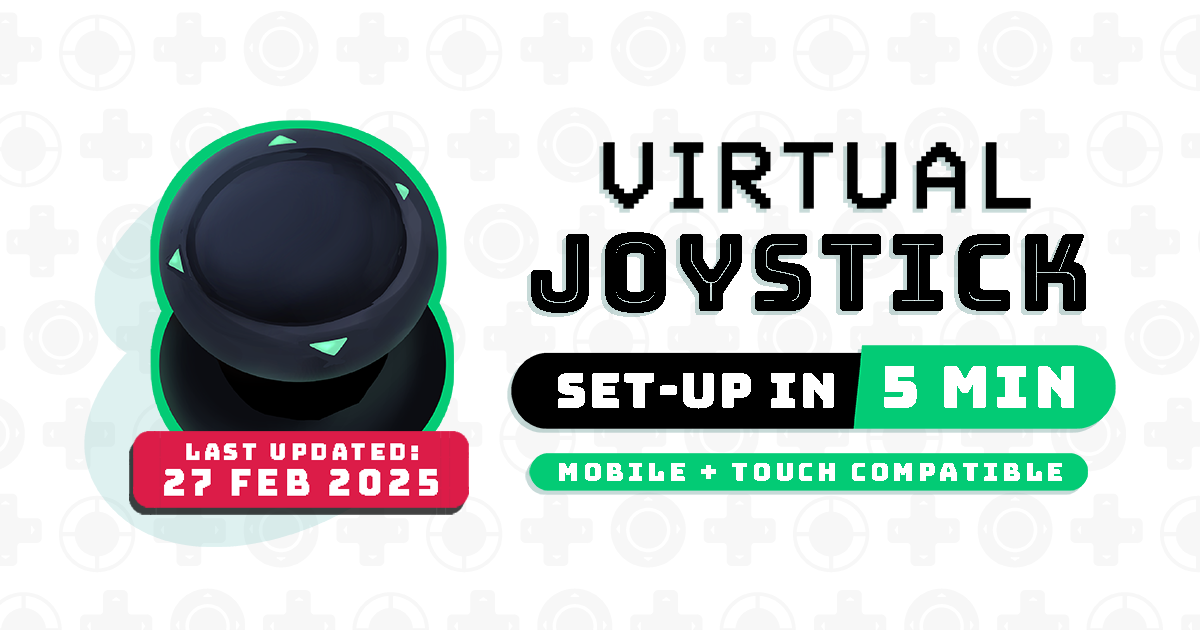
<style>
.page{position:relative;width:1200px;height:630px;background:#ffffff}
.page>*{position:absolute;margin:0}
.t1{font:107px "Bungee-Inline";letter-spacing:0.04em;color:#000000;scale:0.93 1}
.t2{font:58.8px "Bungee-Regular";letter-spacing:0.067em;color:#ffffff}
.t3{font:49.4px "Bungee-Regular";letter-spacing:0.04em;color:#ffffff}
.t4{font:25px "Bungee-Regular";letter-spacing:0.138em;color:#ffffff;scale:1.04 1}
</style>
<div class="page">
<p class="t1" style="left:531px;top:232px;width:555px;height:81px">joystick</p>
<p class="t2" style="left:884px;top:366px;width:190px;height:42px">5 min</p>
<p class="t3" style="left:558px;top:373px;width:276px;height:36px">set-up in</p>
<p class="t4" style="left:559px;top:463px;width:503px;height:18px">MOBILE + TOUCH COMPATIBLE</p>
</div>
